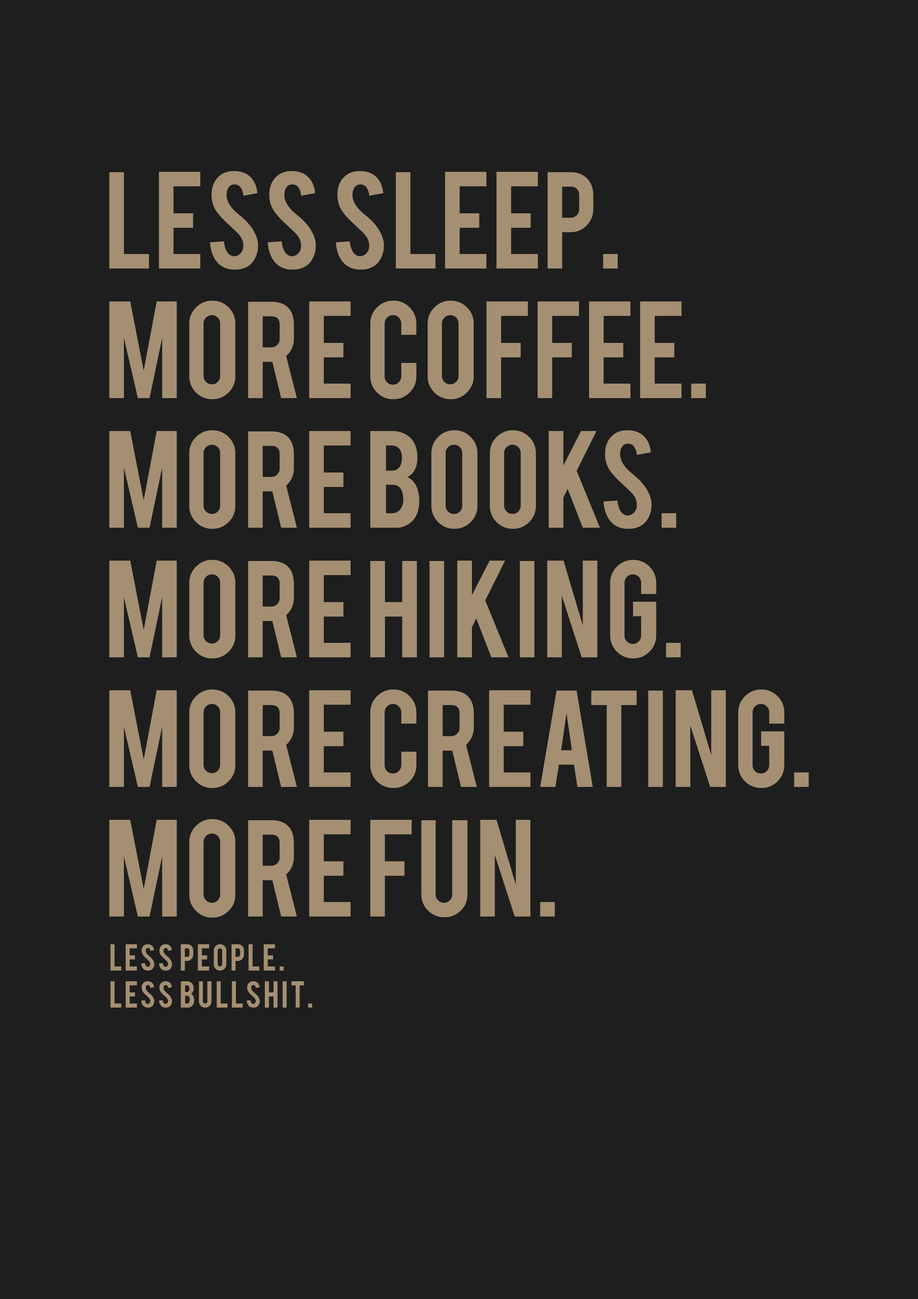
<style>
.page{position:relative;width:918px;height:1299px;background:#1e1e1e}
.page>*{position:absolute;margin:0}
.t1{font:108px "Bebas";color:#a48f72}
.t2{font:29.3px/37px "Bebas";letter-spacing:0.06em;color:#a48f72}
</style>
<div class="page">
<p class="t1" style="left:109px;top:171px;width:700px;height:746px">less sleep.<br>more coffee.<br>more books.<br>more hiking.<br>more creating.<br>more fun.</p>
<p class="t2" style="left:110px;top:944px;width:202px;height:63px">less people.<br>less bullshit.</p>
</div>
